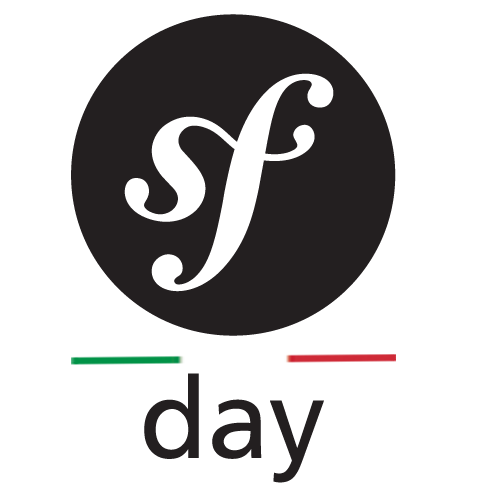
<style>
.page{position:relative;width:500px;height:500px;background:#ffffff}
.page>*{position:absolute;margin:0}
.t1{font:112.5px "Frutiger-Roman";letter-spacing:-0.005em;color:#231f20}
</style>
<div class="page">
<p class="t1" style="left:144px;top:373px;width:180px;height:110px">day</p>
</div>
